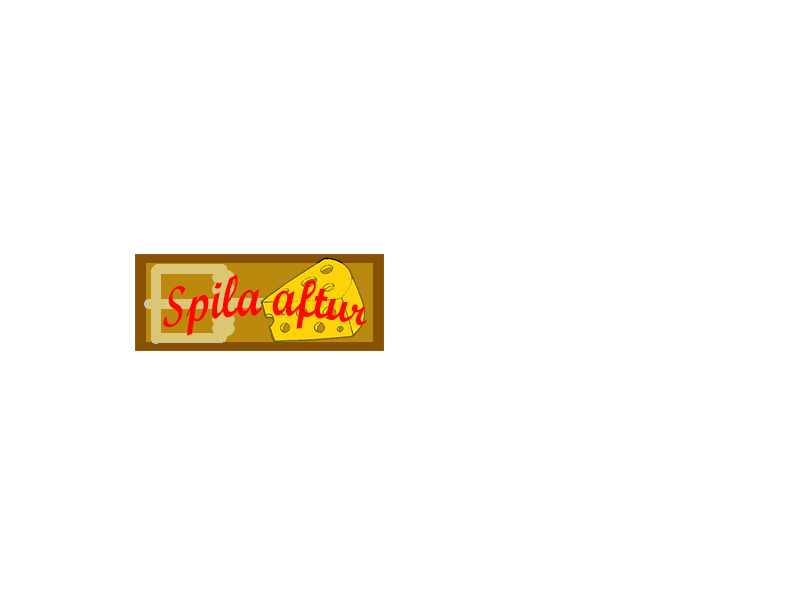
<style>
.page{position:relative;width:800px;height:600px;background:#ffffff}
.page>*{position:absolute;margin:0}
.t1{font:45px "ScriptMTBold";color:#fd0701}
</style>
<div class="page">
<p class="t1" style="left:162px;top:274px;width:205px;height:62px">Spila aftur</p>
</div>
